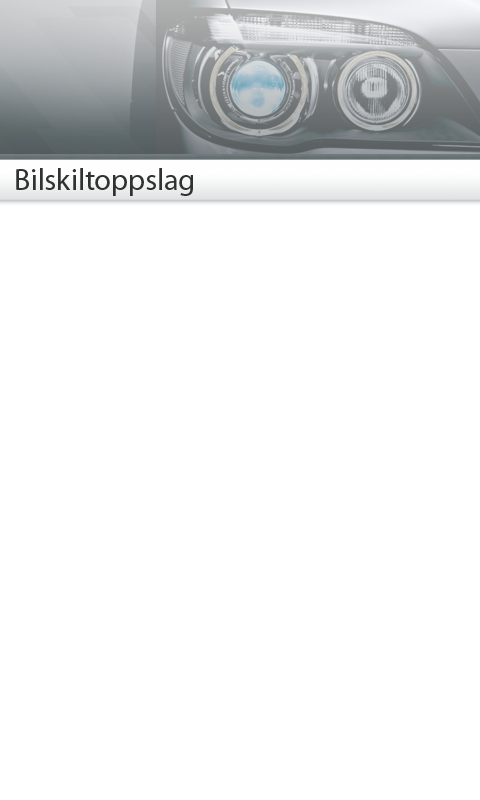
<style>
.page{position:relative;width:480px;height:800px;background:#ffffff}
.page>*{position:absolute;margin:0}
.t1{font:30px "MyriadPro-Regular";color:#313131}
</style>
<div class="page">
<p class="t1" style="left:16px;top:168px;width:177px;height:28px">Bilskiltoppslag</p>
</div>
